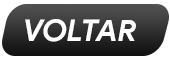
<style>
.page{position:relative;width:170px;height:60px;background:#ffffff}
.page>*{position:absolute;margin:0}
.t1{font:30px "ProductSans-BoldItalic";color:#ffffff}
</style>
<div class="page">
<p class="t1" style="left:25px;top:19px;width:111px;height:23px">VOLTAR</p>
</div>
